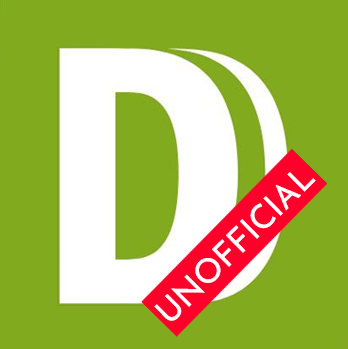
<style>
.page{position:relative;width:348px;height:349px;background:#81aa1e}
.page>*{position:absolute;margin:0}
.t1{font:33.3px "JosefinSansRoman-Regular";color:#ffffff}
</style>
<div class="page">
<p class="t1" style="left:154px;top:172px;width:162px;height:149px;rotate:-45deg">UNOFFICIAL</p>
</div>
